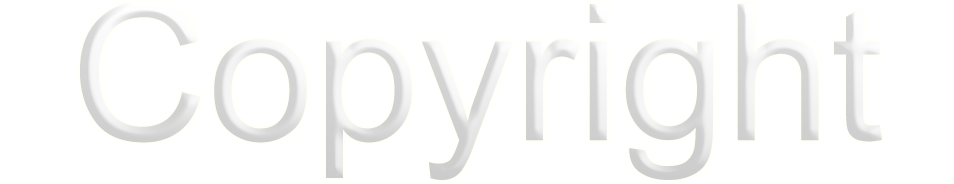
<style>
.page{position:relative;width:954px;height:184px;background:#ffffff}
.page>*{position:absolute;margin:0}
.t1{font:190px "ArialUnicodeMS";color:#e0e0e0}
</style>
<div class="page">
<p class="t1" style="left:80px;top:1px;width:802px;height:179px">Copyright</p>
</div>
